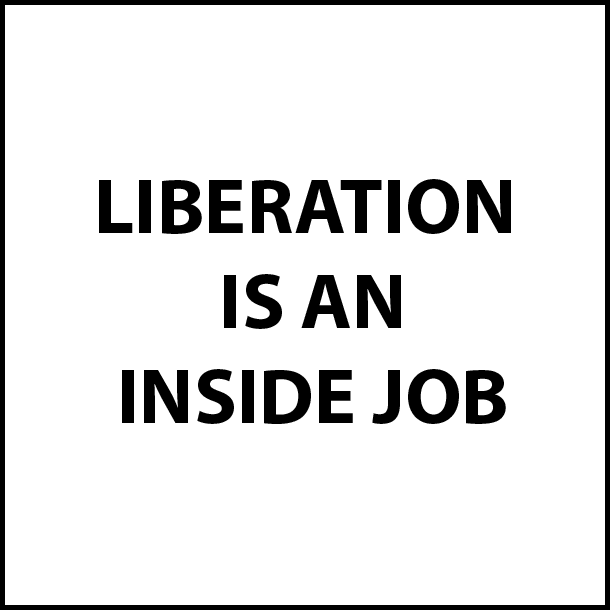
<style>
.page{position:relative;width:610px;height:610px;background:#ffffff}
.page>*{position:absolute;margin:0}
.t1{font:79px "MyriadPro-Bold";color:#000000;text-transform:uppercase}
</style>
<div class="page">
<p class="t1" style="left:99px;top:179px;width:412px;height:245px;text-align:center">LIBERATION<br> IS AN<br> INSIDE JOB</p>
</div>
